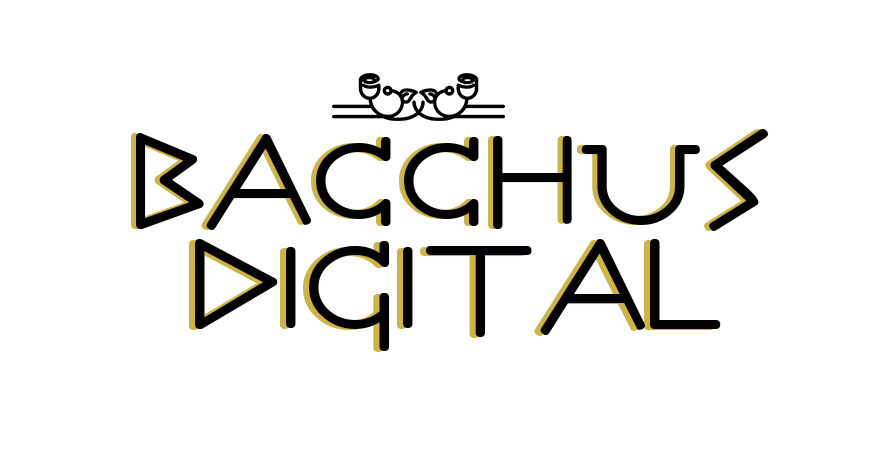
<style>
.page{position:relative;width:877px;height:452px;background:#ffffff}
.page>*{position:absolute;margin:0}
.t1{font:200px "Olympus"}
.t2{font:200px "Olympus";color:#000000}
</style>
<div class="page">
<p class="t1" style="left:131px;top:129px;width:633px;height:102px">bacchus</p>
<p class="t2" style="left:136px;top:129px;width:633px;height:102px">bacchus</p>
<p class="t1" style="left:189px;top:240px;width:526px;height:112px">digital</p>
<p class="t2" style="left:195px;top:239px;width:526px;height:112px">digital</p>
</div>
